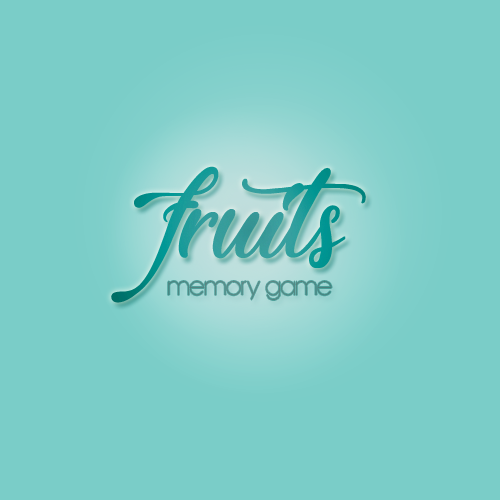
<style>
.page{position:relative;width:500px;height:500px;background:#7acdc8}
.page>*{position:absolute;margin:0}
.t1{font:120px "Lovely-Home"}
.t2{font:18px "BondoluoPeek";color:#54827f}
</style>
<div class="page">
<p class="t1" style="left:111px;top:166px;width:255px;height:137px">fruits</p>
<p class="t2" style="left:168px;top:281px;width:164px;height:19px">memory game</p>
</div>
